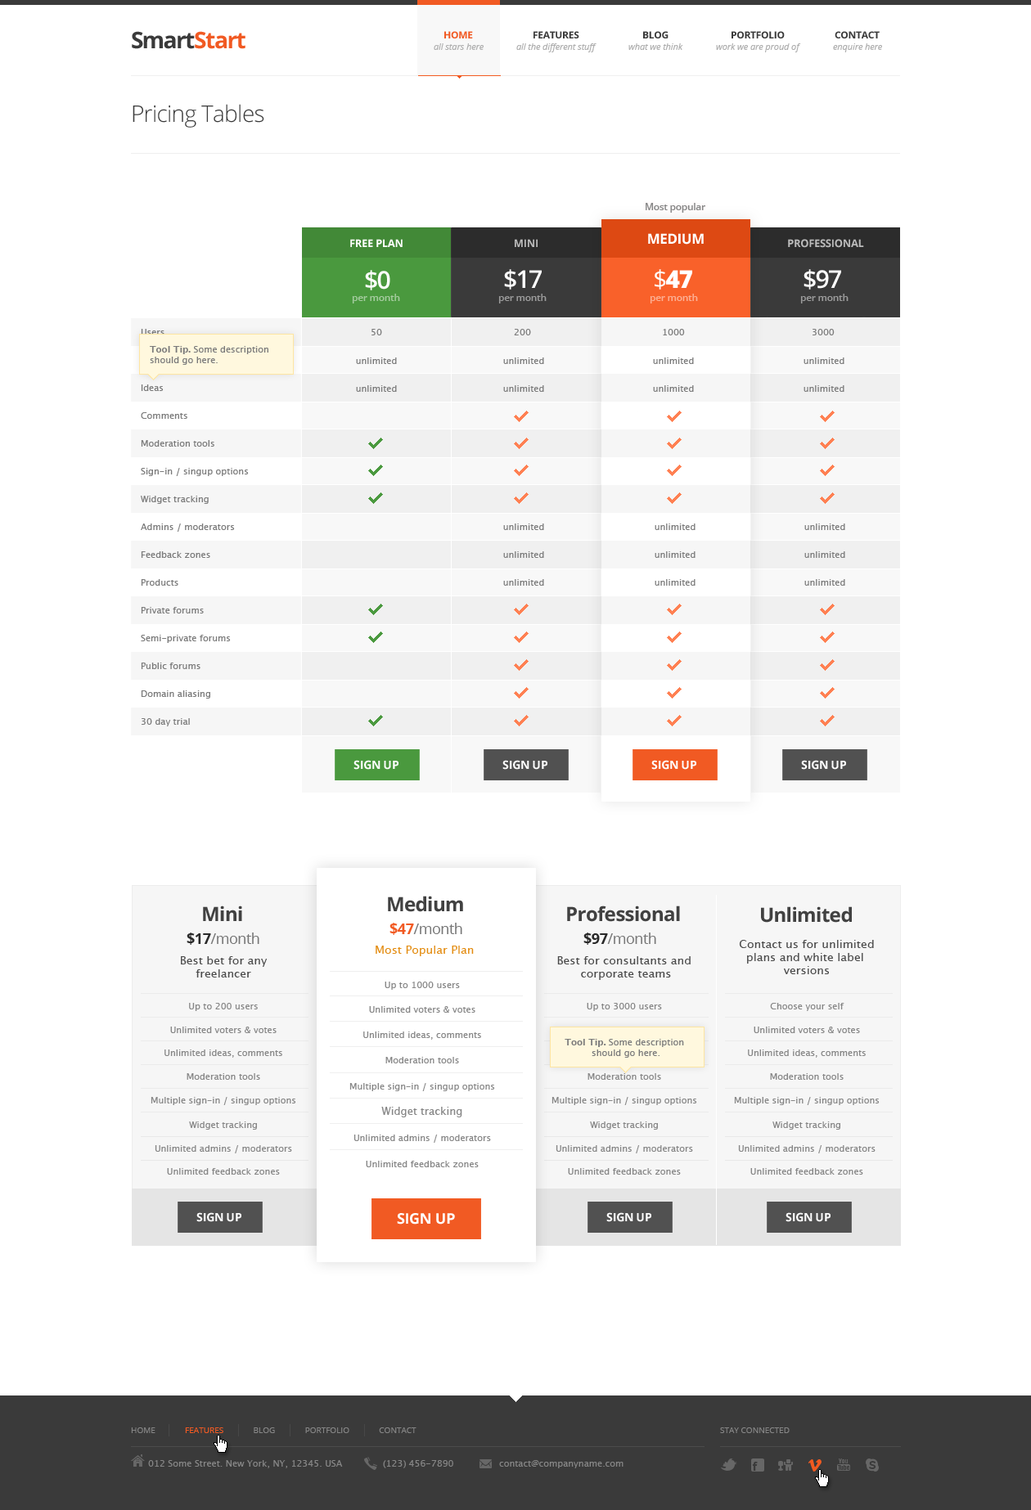
<style>
.page{position:relative;width:1031px;height:1510px;background:#ffffff}
.page>*{position:absolute;margin:0}
.t1{font:22.9px "OpenSans-Bold";letter-spacing:-0.05em;color:#f15a23}
.t2{font:22.9px "OpenSans-Bold";letter-spacing:-0.075em;color:#3a3a3a}
.t3{font:22.9px "OpenSans-Bold";letter-spacing:-0.05em;color:#3a3a3a}
.t4{font:9.8px "OpenSans-Bold";letter-spacing:-0.025em;color:#f15a23;text-transform:uppercase}
.t5{font:9.8px "OpenSans-Bold";letter-spacing:-0.025em;color:#3a3a3a;text-transform:uppercase}
.t6{font:9px "OpenSans-Italic";letter-spacing:-0.01em;color:#aeaeae}
.t7{font:22.9px "OpenSans-Light";letter-spacing:-0.025em;color:#3a3a3a}
.t8{font:9.8px "OpenSans-Semibold";letter-spacing:-0.025em;color:#858585}
.t9{font:13.9px "OpenSans-Bold";letter-spacing:-0.025em;color:#ffffff;text-transform:uppercase}
.t10{font:10.6px "OpenSans-Bold";letter-spacing:-0.025em;color:#ffffff;text-transform:uppercase}
.t11{font:10.6px "OpenSans-Bold";letter-spacing:-0.025em;color:#bbbbbb;text-transform:uppercase}
.t12{font:24.5px "OpenSans-Semibold";letter-spacing:-0.05em;color:#ffffff}
.t13{font:24.5px "OpenSans-Extrabold";letter-spacing:-0.05em;color:#ffffff}
.t14{font:24.5px "OpenSans";letter-spacing:-0.05em;color:#ffffff}
.t15{font:9.8px "OpenSans-Semibold";letter-spacing:-0.025em;color:#a5cc9f}
.t16{font:9.8px "OpenSans-Semibold";letter-spacing:-0.025em;color:#9d9d9d}
.t17{font:9.8px "OpenSans-Semibold";letter-spacing:-0.025em;color:#fcb095}
.t18{font:9.8px "OpenSans-Semibold";letter-spacing:-0.025em}
.t19{font:9px/27.8px "LucidaSans";color:#7b7b7b}
.t20{font:9px "LucidaSans";color:#7b7b7b}
.t21{font:9px/10.6px "LucidaSans";color:#7b7b7b}
.t22{font:9px/10.6px "LucidaSans-Demi";color:#7b7b7b}
.t23{font:11.5px "OpenSans-Bold";letter-spacing:-0.025em;color:#ffffff;text-transform:uppercase}
.t24{font:19.6px "OpenSans-Bold";letter-spacing:-0.025em;color:#414141}
.t25{font:14.7px "OpenSans";letter-spacing:-0.025em;color:#777777}
.t26{font:14.7px "OpenSans-Bold";letter-spacing:-0.025em;color:#f15a23}
.t27{font:14.7px "OpenSans-Bold";letter-spacing:-0.025em;color:#292929}
.t28{font:11.5px/13.1px "LucidaSans";color:#4b4b4b}
.t29{font:11.5px "LucidaSans";color:#e38c11}
.t30{font:9px "LucidaSans";color:#878787}
.t31{font:10.6px "LucidaSans";color:#878787}
.t32{font:14.7px "OpenSans-Bold";letter-spacing:-0.025em;color:#ffffff;text-transform:uppercase}
.t33{font:8.2px "OpenSans";color:#868686;text-transform:uppercase}
.t34{font:8.2px "OpenSans";color:#f15a23;text-transform:uppercase}
.t35{font:9px "LucidaSans";color:#868686}
</style>
<div class="page">
<p class="t1" style="left:132px;top:31px;width:113px;height:18px"><span class="t2">S</span><span class="t3">mart</span>Start</p>
<p class="t4" style="left:444px;top:31px;width:29px;height:7px">Home</p>
<p class="t5" style="left:533px;top:31px;width:46px;height:7px">Features</p>
<p class="t5" style="left:643px;top:31px;width:25px;height:7px">Blog</p>
<p class="t5" style="left:731px;top:31px;width:54px;height:7px">Portfolio</p>
<p class="t5" style="left:835px;top:31px;width:45px;height:7px">Contact</p>
<p class="t6" style="left:434px;top:43px;width:50px;height:7px">all stars here</p>
<p class="t6" style="left:516px;top:43px;width:80px;height:9px">all the different stuff</p>
<p class="t6" style="left:628px;top:43px;width:55px;height:7px">what we think</p>
<p class="t6" style="left:716px;top:43px;width:85px;height:9px">work we are proud of</p>
<p class="t6" style="left:833px;top:43px;width:49px;height:9px">enquire here</p>
<p class="t7" style="left:133px;top:104px;width:131px;height:24px">Pricing Tables</p>
<p class="t8" style="left:646px;top:203px;width:59px;height:10px">Most popular</p>
<p class="t9" style="left:648px;top:233px;width:56px;height:12px">Medium</p>
<p class="t10" style="left:350px;top:239px;width:53px;height:8px">Free plan</p>
<p class="t11" style="left:515px;top:239px;width:23px;height:8px">Mini</p>
<p class="t11" style="left:788px;top:239px;width:76px;height:9px">Professional</p>
<p class="t12" style="left:365px;top:270px;width:25px;height:20px">$0</p>
<p class="t12" style="left:504px;top:269px;width:38px;height:21px">$17</p>
<p class="t13" style="left:655px;top:269px;width:37px;height:21px"><span class="t14">$</span>47</p>
<p class="t12" style="left:803px;top:269px;width:38px;height:21px">$97</p>
<p class="t15" style="left:352px;top:294px;width:48px;height:10px">per month</p>
<p class="t16" style="left:498px;top:294px;width:49px;height:10px">per month</p>
<p class="t17" style="left:650px;top:294px;width:48px;height:10px">per month</p>
<p class="t16" style="left:800px;top:294px;width:48px;height:10px">per month</p>
<p class="t18" style="left:650px;top:295px;width:48px;height:9px">per month</p>
<p class="t19" style="left:141px;top:329px;width:108px;height:398px">Users<br>Voters &amp; votes<br>Ideas<br>Comments<br>Moderation tools<br>Sign-in / singup options<br>Widget tracking<br>Admins / moderators<br>Feedback zones<br>Products<br>Private forums<br>Semi-private forums<br>Public forums<br>Domain aliasing<br>30 day trial</p>
<p class="t20" style="left:371px;top:329px;width:11px;height:6px">50</p>
<p class="t20" style="left:514px;top:329px;width:17px;height:6px">200</p>
<p class="t20" style="left:663px;top:329px;width:22px;height:6px">1000</p>
<p class="t20" style="left:812px;top:329px;width:23px;height:6px">3000</p>
<p class="t21" style="left:150px;top:346px;width:118px;height:19px"><span class="t22">Tool Tip.</span> Some description <br>should go here.</p>
<p class="t20" style="left:356px;top:358px;width:41px;height:6px">unlimited</p>
<p class="t20" style="left:503px;top:358px;width:41px;height:6px">unlimited</p>
<p class="t20" style="left:653px;top:358px;width:41px;height:6px">unlimited</p>
<p class="t20" style="left:803px;top:358px;width:41px;height:6px">unlimited</p>
<p class="t20" style="left:356px;top:385px;width:41px;height:7px">unlimited</p>
<p class="t20" style="left:503px;top:385px;width:41px;height:7px">unlimited</p>
<p class="t20" style="left:653px;top:385px;width:41px;height:7px">unlimited</p>
<p class="t20" style="left:803px;top:385px;width:41px;height:7px">unlimited</p>
<p class="t20" style="left:503px;top:524px;width:41px;height:6px">unlimited</p>
<p class="t20" style="left:655px;top:524px;width:40px;height:6px">unlimited</p>
<p class="t20" style="left:804px;top:524px;width:41px;height:6px">unlimited</p>
<p class="t20" style="left:503px;top:551px;width:41px;height:7px">unlimited</p>
<p class="t20" style="left:655px;top:551px;width:40px;height:7px">unlimited</p>
<p class="t20" style="left:804px;top:551px;width:41px;height:7px">unlimited</p>
<p class="t20" style="left:503px;top:579px;width:41px;height:7px">unlimited</p>
<p class="t20" style="left:655px;top:579px;width:40px;height:7px">unlimited</p>
<p class="t20" style="left:804px;top:579px;width:41px;height:7px">unlimited</p>
<p class="t23" style="left:353px;top:760px;width:45px;height:10px">sign up</p>
<p class="t23" style="left:502px;top:760px;width:45px;height:10px">sign up</p>
<p class="t23" style="left:651px;top:760px;width:45px;height:10px">sign up</p>
<p class="t23" style="left:801px;top:760px;width:45px;height:10px">sign up</p>
<p class="t24" style="left:203px;top:906px;width:39px;height:15px">Mini</p>
<p class="t24" style="left:388px;top:896px;width:75px;height:16px">Medium</p>
<p class="t24" style="left:567px;top:906px;width:113px;height:16px">Professional</p>
<p class="t24" style="left:761px;top:907px;width:91px;height:16px">Unlimited</p>
<p class="t25" style="left:389px;top:923px;width:73px;height:12px"><span class="t26">$47</span>/month</p>
<p class="t25" style="left:187px;top:933px;width:72px;height:12px"><span class="t27">$17</span>/month</p>
<p class="t25" style="left:583px;top:933px;width:73px;height:12px"><span class="t27">$97</span>/month</p>
<p class="t28" style="left:739px;top:940px;width:135px;height:34px;text-align:center">Contact us for unlimited<br>plans and white label <br>versions</p>
<p class="t29" style="left:376px;top:946px;width:98px;height:10px">Most Popular Plan</p>
<p class="t28" style="left:181px;top:956px;width:86px;height:22px;text-align:center">Best bet for any<br>freelancer</p>
<p class="t28" style="left:557px;top:956px;width:134px;height:24px;text-align:center">Best for consultants and <br>corporate teams</p>
<p class="t30" style="left:385px;top:982px;width:75px;height:8px">Up to 1000 users</p>
<p class="t30" style="left:189px;top:1003px;width:69px;height:8px">Up to 200 users</p>
<p class="t30" style="left:369px;top:1006px;width:106px;height:7px">Unlimited voters &amp; votes</p>
<p class="t30" style="left:587px;top:1003px;width:75px;height:8px">Up to 3000 users</p>
<p class="t30" style="left:770px;top:1003px;width:74px;height:8px">Choose your self</p>
<p class="t30" style="left:170px;top:1027px;width:107px;height:6px">Unlimited voters &amp; votes</p>
<p class="t30" style="left:363px;top:1032px;width:118px;height:8px">Unlimited ideas, comments</p>
<p class="t30" style="left:754px;top:1027px;width:106px;height:6px">Unlimited voters &amp; votes</p>
<p class="t30" style="left:164px;top:1050px;width:118px;height:8px">Unlimited ideas, comments</p>
<p class="t21" style="left:565px;top:1039px;width:119px;height:19px;text-align:center"><span class="t22">Tool Tip.</span> Some description <br>should go here.</p>
<p class="t30" style="left:748px;top:1050px;width:118px;height:8px">Unlimited ideas, comments</p>
<p class="t30" style="left:385px;top:1057px;width:74px;height:7px">Moderation tools</p>
<p class="t30" style="left:187px;top:1073px;width:73px;height:7px">Moderation tools</p>
<p class="t30" style="left:587px;top:1073px;width:74px;height:7px">Moderation tools</p>
<p class="t30" style="left:770px;top:1073px;width:74px;height:7px">Moderation tools</p>
<p class="t30" style="left:349px;top:1083px;width:146px;height:8px">Multiple sign-in / singup options</p>
<p class="t30" style="left:151px;top:1097px;width:145px;height:8px">Multiple sign-in / singup options</p>
<p class="t30" style="left:551px;top:1097px;width:146px;height:8px">Multiple sign-in / singup options</p>
<p class="t30" style="left:734px;top:1097px;width:146px;height:8px">Multiple sign-in / singup options</p>
<p class="t31" style="left:381px;top:1107px;width:81px;height:11px">Widget tracking</p>
<p class="t30" style="left:189px;top:1122px;width:68px;height:8px">Widget tracking</p>
<p class="t30" style="left:590px;top:1122px;width:68px;height:8px">Widget tracking</p>
<p class="t30" style="left:772px;top:1122px;width:68px;height:8px">Widget tracking</p>
<p class="t30" style="left:155px;top:1145px;width:137px;height:9px">Unlimited admins / moderators</p>
<p class="t30" style="left:353px;top:1135px;width:138px;height:8px">Unlimited admins / moderators</p>
<p class="t30" style="left:556px;top:1145px;width:137px;height:9px">Unlimited admins / moderators</p>
<p class="t30" style="left:738px;top:1145px;width:137px;height:9px">Unlimited admins / moderators</p>
<p class="t30" style="left:167px;top:1168px;width:113px;height:7px">Unlimited feedback zones</p>
<p class="t30" style="left:366px;top:1161px;width:113px;height:7px">Unlimited feedback zones</p>
<p class="t30" style="left:568px;top:1168px;width:113px;height:7px">Unlimited feedback zones</p>
<p class="t30" style="left:750px;top:1168px;width:113px;height:7px">Unlimited feedback zones</p>
<p class="t23" style="left:196px;top:1213px;width:45px;height:9px">sign up</p>
<p class="t32" style="left:397px;top:1213px;width:58px;height:12px">sign up</p>
<p class="t23" style="left:606px;top:1213px;width:45px;height:9px">sign up</p>
<p class="t23" style="left:785px;top:1213px;width:45px;height:9px">sign up</p>
<p class="t33" style="left:131px;top:1428px;width:285px;height:5px">Home              <span class="t34">Features</span>              Blog              Portfolio              Contact</p>
<p class="t33" style="left:720px;top:1428px;width:70px;height:5px">Stay connected</p>
<p class="t35" style="left:148px;top:1460px;width:195px;height:9px">012 Some Street. New York, NY, 12345. USA</p>
<p class="t35" style="left:383px;top:1460px;width:70px;height:9px">(123) 456-7890</p>
<p class="t35" style="left:499px;top:1460px;width:124px;height:9px">contact@companyname.com</p>
</div>
